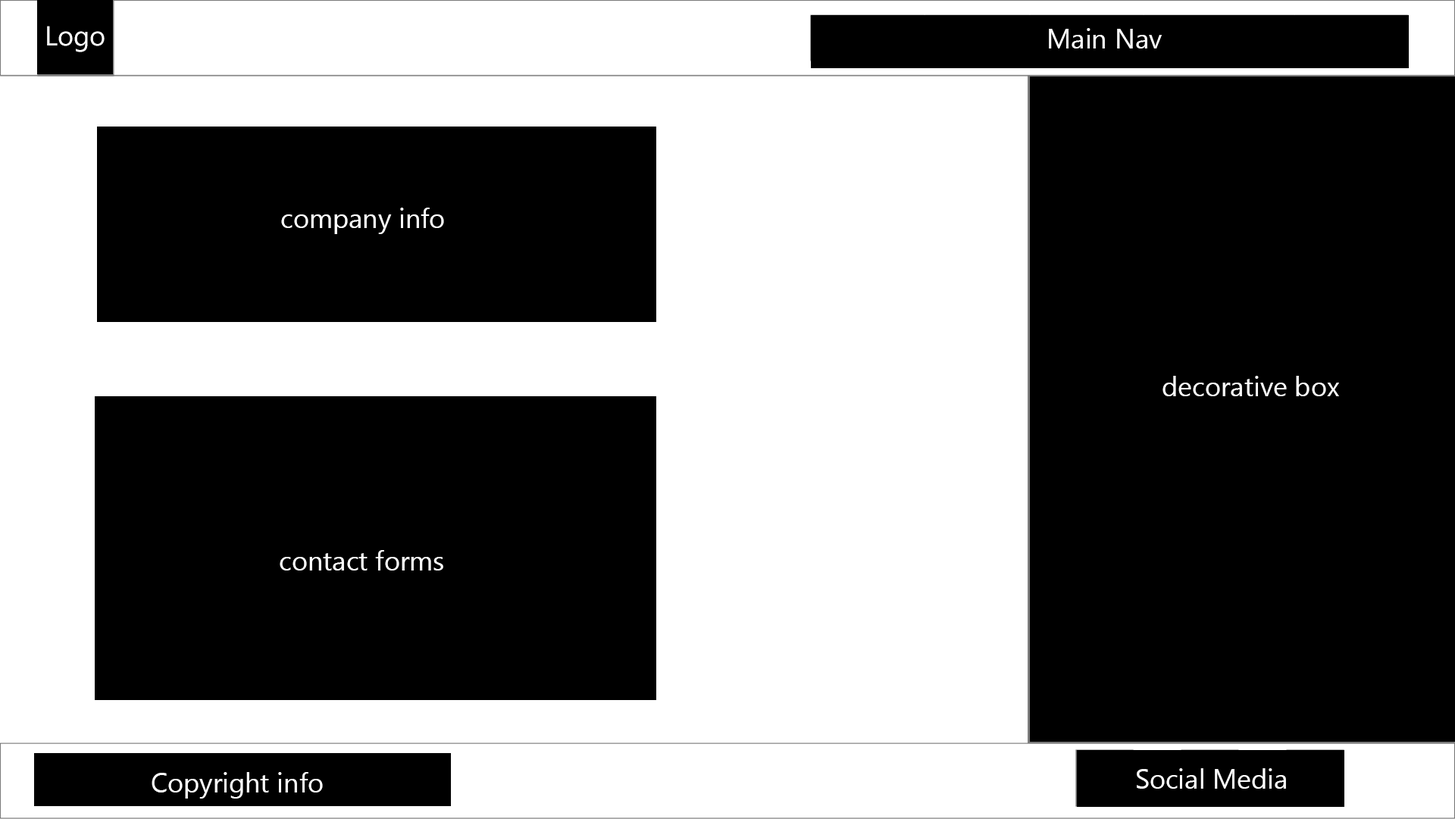
<style>
.page{position:relative;width:1455px;height:819px;background:#000000}
.page>*{position:absolute;margin:0}
.t1{font:27.3px "SegoeUI";color:#ffffff}
</style>
<div class="page">
<p class="t1" style="left:47px;top:26px;width:58px;height:26px">Logo</p>
<p class="t1" style="left:1049px;top:28px;width:113px;height:21px">Main Nav</p>
<p class="t1" style="left:281px;top:208px;width:163px;height:26px">company info</p>
<p class="t1" style="left:1163px;top:376px;width:176px;height:20px">decorative box</p>
<p class="t1" style="left:280px;top:550px;width:163px;height:21px">contact forms</p>
<p class="t1" style="left:152px;top:772px;width:171px;height:27px">Copyright info</p>
<p class="t1" style="left:1137px;top:769px;width:149px;height:20px">Social Media</p>
</div>
